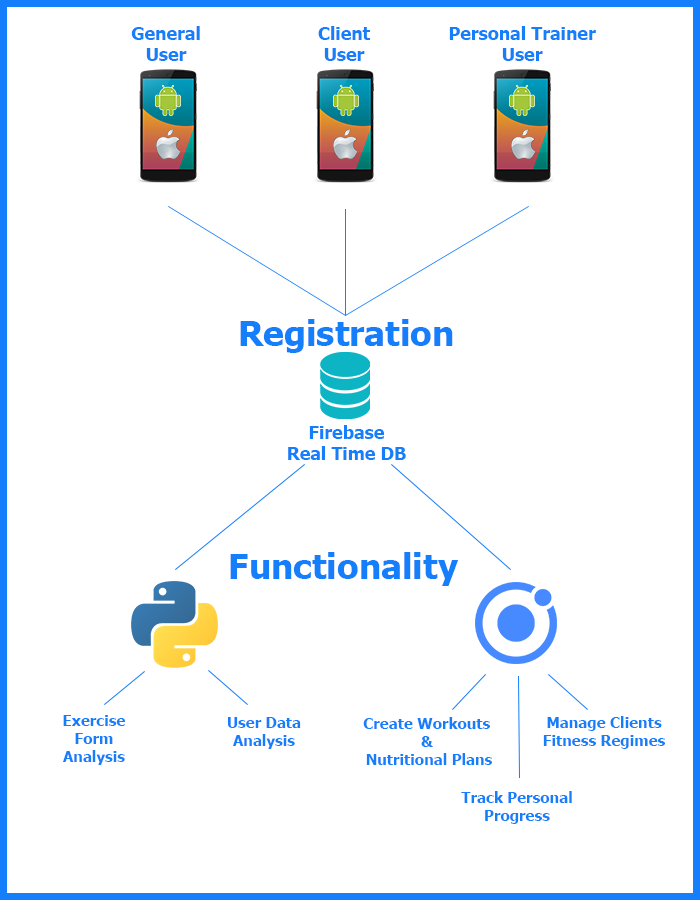
<style>
.page{position:relative;width:700px;height:900px;background:#ffffff}
.page>*{position:absolute;margin:0}
.t1{font:17.8px "Tahoma-Bold";color:#157efb}
.t2{font:35px "Tahoma-Bold";color:#157efb}
.t3{font:15px "Tahoma-Bold";color:#157efb}
</style>
<div class="page">
<p class="t1" style="left:131px;top:26px;width:69px;height:35px;text-align:center">General<br>User</p>
<p class="t1" style="left:318px;top:26px;width:52px;height:35px;text-align:center">Client<br>User</p>
<p class="t1" style="left:449px;top:26px;width:147px;height:35px;text-align:center">Personal Trainer<br>User</p>
<p class="t2" style="left:240px;top:319px;width:213px;height:34px">Registration</p>
<p class="t1" style="left:288px;top:425px;width:118px;height:35px;text-align:center">Firebase<br>Real Time DB</p>
<p class="t2" style="left:230px;top:552px;width:229px;height:34px">Functionality</p>
<p class="t3" style="left:63px;top:715px;width:62px;height:50px;text-align:center">Exercise<br>Form<br>Analysis</p>
<p class="t3" style="left:228px;top:717px;width:73px;height:32px;text-align:center">User Data<br>Analysis</p>
<p class="t3" style="left:363px;top:717px;width:129px;height:48px;text-align:center">Create Workouts <br>&amp; <br>Nutritional Plans</p>
<p class="t3" style="left:543px;top:716px;width:122px;height:33px;text-align:center">Manage Clients<br>Fitness Regimes</p>
<p class="t3" style="left:461px;top:791px;width:111px;height:33px;text-align:center">Track Personal<br>Progress</p>
</div>
